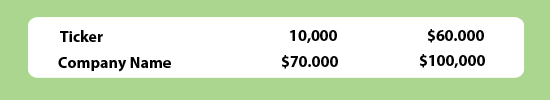
<style>
.page{position:relative;width:550px;height:100px;background:#ffffff}
.page>*{position:absolute;margin:0}
.t1{font:16px "MyriadPro-Bold";color:#010101}
</style>
<div class="page">
<p class="t1" style="left:60px;top:30px;width:43px;height:12px">Ticker</p>
<p class="t1" style="left:290px;top:30px;width:47px;height:13px">10,000</p>
<p class="t1" style="left:428px;top:29px;width:56px;height:14px">$60.000</p>
<p class="t1" style="left:420px;top:54px;width:65px;height:14px">$100,000</p>
<p class="t1" style="left:58px;top:57px;width:113px;height:15px">Company Name</p>
<p class="t1" style="left:282px;top:55px;width:56px;height:14px">$70.000</p>
</div>
